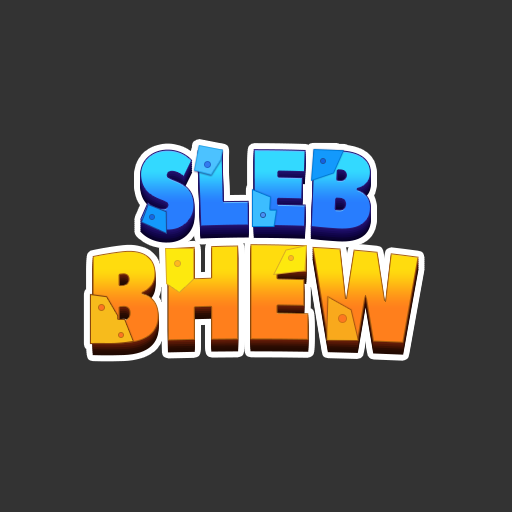
<style>
.page{position:relative;width:512px;height:512px;background:#333333}
.page>*{position:absolute;margin:0}
.t1{font:109.7px "PeaceSans";letter-spacing:-0.025em;scale:0.81 1}
.t2{font:123.7px "PeaceSans";scale:0.83 1}
</style>
<div class="page">
<p class="t1" style="left:140px;top:149px;width:231px;height:82px">SLEB</p>
<p class="t2" style="left:92px;top:244px;width:327px;height:100px">BHEW</p>
</div>
